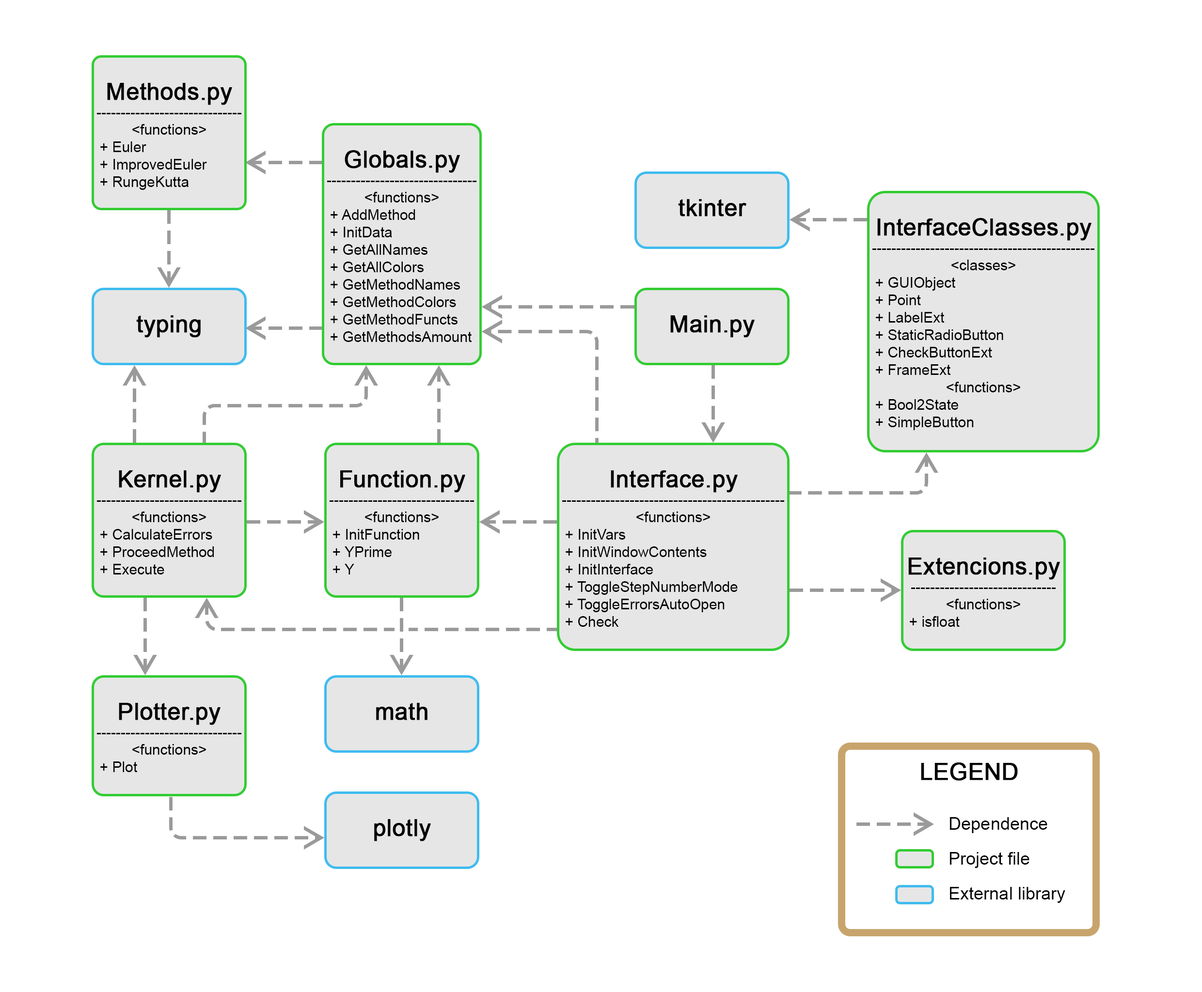
<style>
.page{position:relative;width:1202px;height:992px;background:#ffffff}
.page>*{position:absolute;margin:0}
.t1{font:14.5px "ArialMT";color:#000000}
.t2{font:23.3px "ArialMT";color:#000000}
.t3{font:23.3px "ArialMT";color:#000000;font-weight:bold}
.t4{font:17.4px/34.9px "ArialMT";color:#000000}
</style>
<div class="page">
<p class="t1" style="left:97px;top:83px;width:144px;height:107px;text-align:center"><span class="t2"><br></span><span class="t3">Methods.py</span><br>------------------------------<br>&lt;functions&gt;<br>  + Euler<br>  + ImprovedEuler<br>  + RungeKutta</p>
<p class="t1" style="left:327px;top:150px;width:149px;height:192px;text-align:center"><span class="t2"><br></span><span class="t3">Globals.py</span><br>-------------------------------<br>&lt;functions&gt;<br>  + AddMethod<br>  + InitData<br>  + GetAllNames<br>  + GetAllColors<br>  + GetMethodNames<br>  + GetMethodColors<br>  + GetMethodFuncts<br>  + GetMethodsAmount</p>
<p class="t3" style="left:678px;top:199px;width:68px;height:18px"><span class="t2"><br></span>tkinter</p>
<p class="t1" style="left:872px;top:218px;width:222px;height:212px;text-align:center"><span class="t2"><br></span><span class="t3">InterfaceClasses.py</span><br>----------------------------------------------<br>&lt;classes&gt;<br>  + GUIObject<br>  + Point<br>  + LabelExt<br>  + StaticRadioButton<br>  + CheckButtonExt<br>  + FrameExt<br>&lt;functions&gt;<br>  + Bool2State<br>  + SimpleButton</p>
<p class="t3" style="left:136px;top:315px;width:65px;height:23px"><span class="t2"><br></span>typing</p>
<p class="t3" style="left:670px;top:315px;width:84px;height:23px"><span class="t2"><br></span>Main.py</p>
<p class="t1" style="left:97px;top:470px;width:144px;height:105px;text-align:center"><span class="t2"><br></span><span class="t3">Kernel.py</span><br>------------------------------<br>&lt;functions&gt;<br>  + CalculateErrors<br>  + ProceedMethod<br>  + Execute</p>
<p class="t1" style="left:329px;top:470px;width:145px;height:105px;text-align:center"><span class="t2"><br></span><span class="t3">Function.py</span><br>------------------------------<br>&lt;functions&gt;<br>  + InitFunction<br>  + YPrime<br>  + Y</p>
<p class="t1" style="left:562px;top:470px;width:222px;height:157px;text-align:center"><span class="t2"><br></span><span class="t3">Interface.py</span><br>----------------------------------------------<br>&lt;functions&gt;<br>  + InitVars<br>  + InitWindowContents<br>  + InitInterface<br>  + ToggleStepNumberMode<br>  + ToggleErrorsAutoOpen<br>  + Check</p>
<p class="t1" style="left:908px;top:558px;width:152px;height:69px;text-align:center"><span class="t2"><br></span><span class="t3">Extencions.py<br></span>------------------------------<br>&lt;functions&gt;<br>  + isfloat</p>
<p class="t1" style="left:97px;top:703px;width:144px;height:69px;text-align:center"><span class="t2"><br></span><span class="t3">Plotter.py<br></span>------------------------------<br>&lt;functions&gt;<br>  + Plot</p>
<p class="t3" style="left:376px;top:703px;width:51px;height:18px"><span class="t2"><br></span>math</p>
<p class="t3" style="left:921px;top:763px;width:97px;height:18px">LEGEND</p>
<p class="t3" style="left:374px;top:819px;width:57px;height:23px"><span class="t2"><br></span>plotly</p>
<p class="t4" style="left:949px;top:817px;width:116px;height:86px">Dependence<br>Project file<br>External library</p>
</div>
